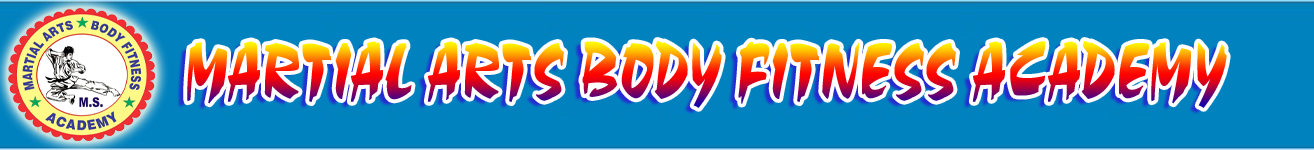
<style>
.page{position:relative;width:1314px;height:150px;background:#0082be}
.page>*{position:absolute;margin:0}
.t1{font:83.6px "Stucco555";scale:0.75 1}
</style>
<div class="page">
<p class="t1" style="left:187px;top:41px;width:1040px;height:67px">MARTIAL ARTS BODY FITNESS ACADEMY</p>
</div>
